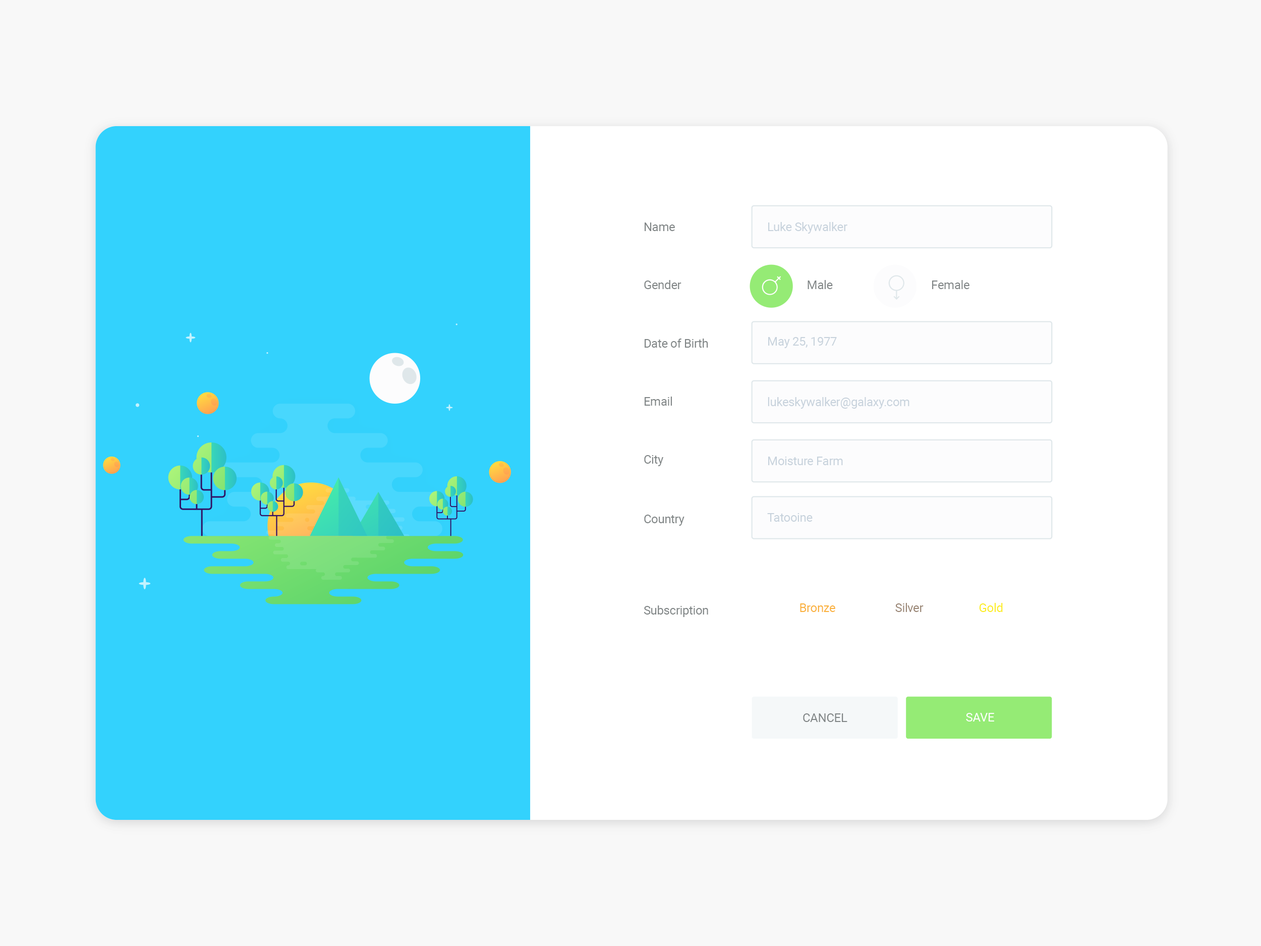
<style>
.page{position:relative;width:1261px;height:946px;background:#f8f8f8}
.page>*{position:absolute;margin:0}
.t1{font:12.3px "Roboto-Regular";letter-spacing:-0.025em;color:#c8d3dc}
.t2{font:12.3px "Roboto-Regular";letter-spacing:-0.025em;color:#818587}
.t3{font:12.3px "Roboto-Regular";letter-spacing:-0.025em;color:#fbb03b}
.t4{font:12.3px "Roboto-Regular";letter-spacing:-0.025em;color:#998675}
.t5{font:12.3px "Roboto-Regular";letter-spacing:-0.025em;color:#fcee21}
.t6{font:12.3px "Roboto-Regular";letter-spacing:-0.025em;color:#ffffff}
</style>
<div class="page">
<p class="t1" style="left:768px;top:222px;width:79px;height:12px">Luke Skywalker</p>
<p class="t2" style="left:645px;top:222px;width:30px;height:9px">Name</p>
<p class="t2" style="left:644px;top:280px;width:37px;height:9px">Gender</p>
<p class="t2" style="left:807px;top:280px;width:26px;height:9px">Male</p>
<p class="t2" style="left:932px;top:280px;width:37px;height:9px">Female</p>
<p class="t2" style="left:645px;top:338px;width:63px;height:10px">Date of Birth</p>
<p class="t1" style="left:768px;top:337px;width:69px;height:11px">May 25, 1977</p>
<p class="t2" style="left:645px;top:396px;width:27px;height:10px">Email</p>
<p class="t1" style="left:768px;top:397px;width:141px;height:12px">lukeskywalker@galaxy.com</p>
<p class="t2" style="left:644px;top:455px;width:20px;height:11px">City</p>
<p class="t1" style="left:768px;top:456px;width:75px;height:9px">Moisture Farm</p>
<p class="t2" style="left:644px;top:514px;width:40px;height:12px">Country</p>
<p class="t1" style="left:767px;top:513px;width:46px;height:9px">Tatooine</p>
<p class="t2" style="left:644px;top:605px;width:64px;height:12px">Subscription</p>
<p class="t3" style="left:800px;top:603px;width:35px;height:9px">Bronze</p>
<p class="t4" style="left:895px;top:603px;width:28px;height:9px">Silver</p>
<p class="t5" style="left:979px;top:603px;width:24px;height:9px">Gold</p>
<p class="t2" style="left:803px;top:713px;width:44px;height:9px">CANCEL</p>
<p class="t6" style="left:966px;top:713px;width:28px;height:8px">SAVE</p>
</div>
